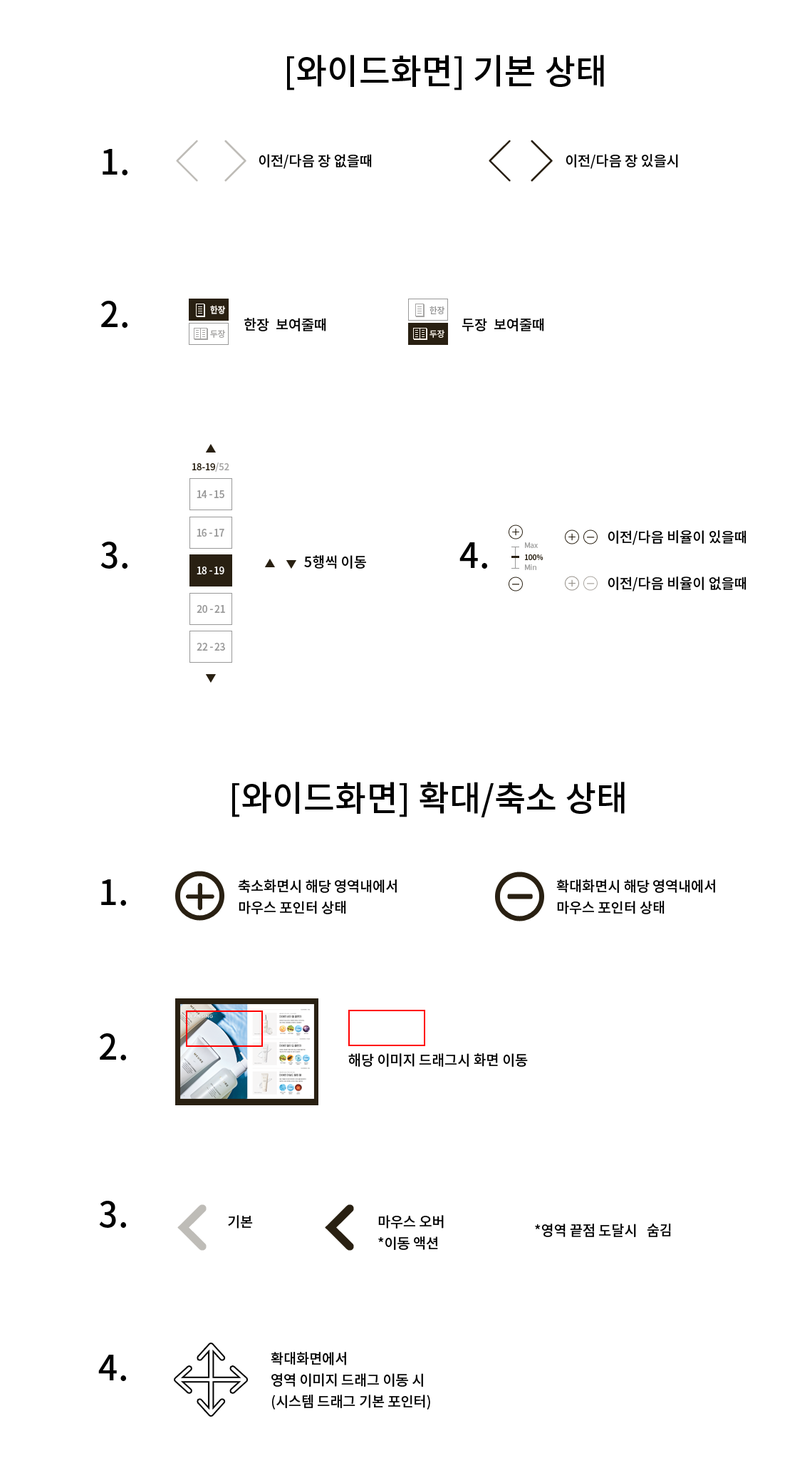
<style>
.page{position:relative;width:812px;height:1468px;background:#ffffff}
.page>*{position:absolute;margin:0}
.t1{font:35px "NotoSansCJKkr-Medium";color:#000000}
.t2{font:14.3px "NotoSansCJKkr-Medium";color:#000000}
.t3{font:8.6px "NotoSansCJKkr-Medium"}
.t4{font:8.6px "NotoSansCJKkr-Medium";color:#f7f1e8}
.t5{font:8.6px "NotoSansCJKkr-Medium";color:#999999}
.t6{font:8.6px "NotoSansCJKkr-Medium";color:#a6a5a4}
.t7{font:14.3px/21.4px "NotoSansCJKkr-Medium";color:#000000}
</style>
<div class="page">
<p class="t1" style="left:287px;top:55px;width:317px;height:35px">[와이드화면] 기본 상태</p>
<p class="t1" style="left:103px;top:149px;width:25px;height:26px">1.</p>
<p class="t2" style="left:259px;top:154px;width:113px;height:15px">이전/다음 장 없을때</p>
<p class="t2" style="left:566px;top:154px;width:112px;height:15px">이전/다음 장 있을시</p>
<p class="t1" style="left:101px;top:301px;width:27px;height:27px">2.</p>
<p class="t3" style="left:210px;top:306px;width:15px;height:8px">한장</p>
<p class="t4" style="left:210px;top:305px;width:15px;height:9px">한장</p>
<p class="t5" style="left:430px;top:306px;width:15px;height:8px">한장</p>
<p class="t2" style="left:244px;top:318px;width:82px;height:13px">한장  보여줄때</p>
<p class="t2" style="left:462px;top:318px;width:82px;height:13px">두장  보여줄때</p>
<p class="t6" style="left:210px;top:330px;width:15px;height:8px">두장</p>
<p class="t4" style="left:430px;top:330px;width:15px;height:8px">두장</p>
<p class="t2" style="left:608px;top:530px;width:139px;height:15px">이전/다음 비율이 있을때</p>
<p class="t1" style="left:100px;top:542px;width:28px;height:27px">3.</p>
<p class="t1" style="left:460px;top:542px;width:27px;height:27px">4.</p>
<p class="t2" style="left:304px;top:555px;width:62px;height:14px">5행씩 이동</p>
<p class="t2" style="left:608px;top:576px;width:139px;height:15px">이전/다음 비율이 없을때</p>
<p class="t1" style="left:232px;top:782px;width:393px;height:35px">[와이드화면] 확대/축소 상태</p>
<p class="t1" style="left:101px;top:879px;width:25px;height:27px">1.</p>
<p class="t7" style="left:238px;top:879px;width:159px;height:35px">축소화면시 해당 영역내에서<br>마우스 포인터 상태</p>
<p class="t7" style="left:557px;top:879px;width:158px;height:35px">확대화면시 해당 영역내에서<br>마우스 포인터 상태</p>
<p class="t1" style="left:100px;top:1033px;width:26px;height:27px">2.</p>
<p class="t2" style="left:348px;top:1053px;width:180px;height:14px">해당 이미지 드래그시 화면 이동</p>
<p class="t1" style="left:99px;top:1201px;width:27px;height:27px">3.</p>
<p class="t2" style="left:228px;top:1215px;width:25px;height:13px">기본</p>
<p class="t7" style="left:378px;top:1215px;width:66px;height:35px">마우스 오버<br>*이동 액션</p>
<p class="t2" style="left:535px;top:1223px;width:136px;height:14px">*영역 끝점 도달시   숨김</p>
<p class="t1" style="left:98px;top:1355px;width:28px;height:26px">4.</p>
<p class="t7" style="left:271px;top:1352px;width:159px;height:57px">확대화면에서<br>영역 이미지 드래그 이동 시<br>(시스템 드래그 기본 포인터)</p>
</div>
